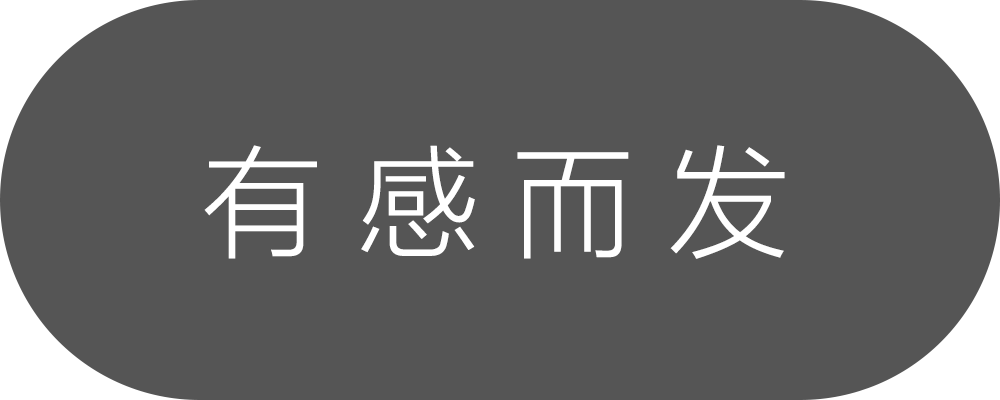
<style>
.page{position:relative;width:1000px;height:400px;background:#555555}
.page>*{position:absolute;margin:0}
.t1{font:120px "MicrosoftYaHeiLight";color:#ffffff}
</style>
<div class="page">
<p class="t1" style="left:204px;top:145px;width:581px;height:114px">有 感 而 发</p>
</div>
